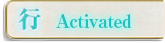
<style>
.page{position:relative;width:165px;height:43px}
.page>*{position:absolute;margin:0}
.t1{font:18px "RyuminPro-ExBold";letter-spacing:-0.04em;color:#24bfbd}
</style>
<div class="page">
<p class="t1" style="left:56px;top:14px;width:76px;height:14px">Activated</p>
</div>
